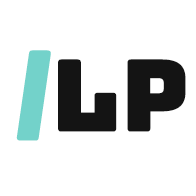
<style>
.page{position:relative;width:196px;height:196px;background:#ffffff}
.page>*{position:absolute;margin:0}
.t1{font:100px "Bungee-Regular";color:#141414}
.t2{font:100px "Bungee-Regular";color:#73d2ca}
</style>
<div class="page">
<p class="t1" style="left:16px;top:50px;width:170px;height:91px"><span class="t2">/</span>LP</p>
</div>
